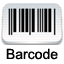
<style>
.page{position:relative;width:64px;height:64px;background:#ffffff}
.page>*{position:absolute;margin:0}
.t1{font:14px "ArialMT";color:#000000}
</style>
<div class="page">
<p class="t1" style="left:6px;top:48px;width:52px;height:12px">Barcode</p>
</div>
